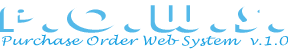
<style>
.page{position:relative;width:288px;height:49px;background:#ffffff}
.page>*{position:absolute;margin:0}
.t1{font:12px "LucidaHandwriting-Italic";letter-spacing:0.02em;color:#1ba1e2;scale:1.25 1}
</style>
<div class="page">
<p class="t1" style="left:2px;top:34px;width:287px;height:15px">Purchase Order Web System  v.1.0</p>
</div>
